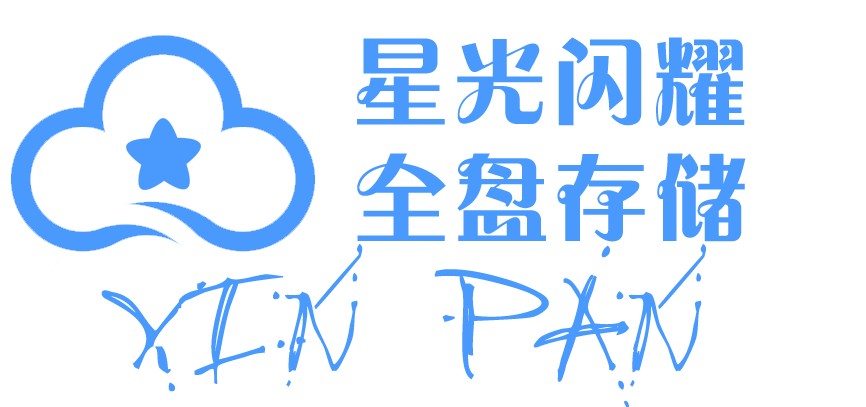
<style>
.page{position:relative;width:866px;height:407px;background:#ffffff}
.page>*{position:absolute;margin:0}
.t1{font:102px "FZCHYJW--GB1-0";color:#4a9afd}
.t2{font:136px "JungleRuff";color:#4a9afd;font-weight:bold}
</style>
<div class="page">
<p class="t1" style="left:357px;top:37px;width:388px;height:89px">星光闪耀</p>
<p class="t1" style="left:357px;top:153px;width:389px;height:89px">全盘存储</p>
<p class="t2" style="left:101px;top:244px;width:605px;height:164px">Xin  pan</p>
</div>
